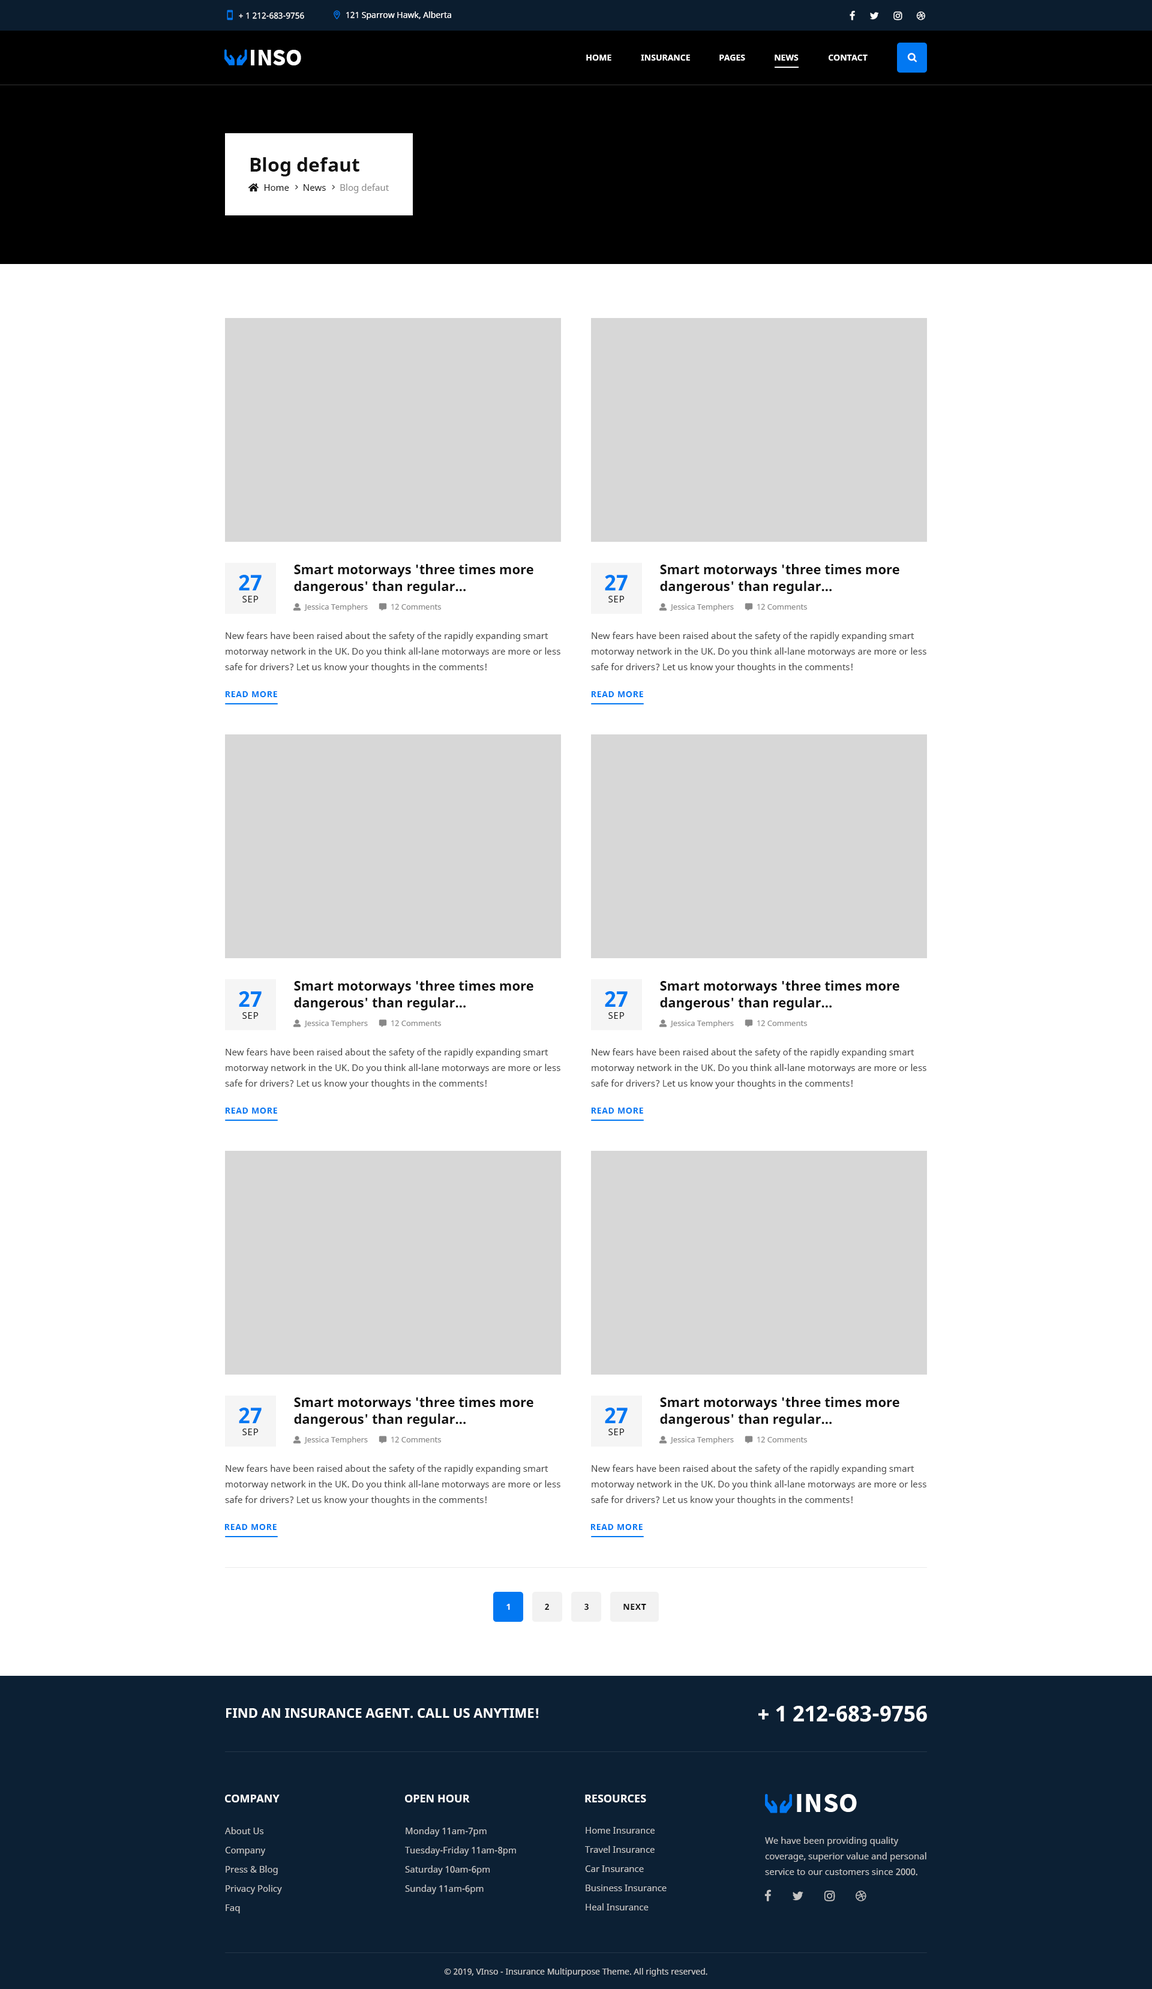
<style>
.page{position:relative;width:1152px;height:1989px;background:#ffffff}
.page>*{position:absolute;margin:0}
.t1{font:8.4px "NotoSans";color:#ffffff}
.t2{font:24px "SourceSansPro-Bold";color:#ffffff;text-transform:uppercase}
.t3{font:8.4px "NotoSans-Bold";color:#ffffff;text-transform:uppercase}
.t4{font:19.2px "NotoSans-Bold";color:#111111}
.t5{font:13.2px/16.8px "NotoSans-Bold";color:#111111}
.t6{font:9px/12px "NotoSans";letter-spacing:0.05em;color:#111111;text-transform:uppercase}
.t7{font:21.6px/12px "NotoSans-Bold";color:#0278f2;text-transform:uppercase}
.t8{font:9px/15.6px "NotoSans";color:#444444}
.t9{font:8.4px "NotoSans-Bold";letter-spacing:0.05em;color:#0278f2;text-transform:uppercase}
.t10{font:8.4px "NotoSans-Bold";letter-spacing:0.05em;color:#ffffff;text-transform:uppercase}
.t11{font:8.4px "NotoSans-Bold";letter-spacing:0.05em;color:#111111;text-transform:uppercase}
.t12{font:13.2px "NotoSans-Bold";color:#ffffff;text-transform:uppercase}
.t13{font:21.6px "NotoSans-Bold";color:#ffffff;text-transform:uppercase}
.t14{font:10.8px "NotoSans-Bold";color:#ffffff}
.t15{font:10.8px "NotoSans-Bold";color:#ffffff;text-transform:uppercase}
.t16{font:27.6px "SourceSansPro-Bold";letter-spacing:0.025em;color:#ffffff;text-transform:uppercase}
.t17{font:9px/19.2px "NotoSans";color:#c4c4c4}
.t18{font:9px/15.6px "NotoSans";color:#c4c4c4}
.t19{font:8.4px "NotoSans";color:#c4c4c4}
</style>
<div class="page">
<p class="t1" style="left:239px;top:12px;width:65px;height:7px">+ 1 212-683-9756</p>
<p class="t1" style="left:346px;top:11px;width:105px;height:9px">121 Sparrow Hawk, Alberta</p>
<p class="t2" style="left:251px;top:50px;width:50px;height:15px">inso</p>
<p class="t3" style="left:586px;top:55px;width:25px;height:6px">Home</p>
<p class="t3" style="left:641px;top:55px;width:49px;height:6px">Insurance</p>
<p class="t3" style="left:719px;top:55px;width:26px;height:6px">Pages</p>
<p class="t3" style="left:775px;top:55px;width:24px;height:6px">News</p>
<p class="t3" style="left:829px;top:55px;width:39px;height:6px">COntact</p>
<p class="t4" style="left:250px;top:157px;width:109px;height:19px">Blog defaut</p>
<p class="t5" style="left:294px;top:564px;width:239px;height:30px">Smart motorways 'three times more<br>dangerous' than regular...</p>
<p class="t5" style="left:660px;top:564px;width:239px;height:30px">Smart motorways 'three times more<br>dangerous' than regular...</p>
<p class="t6" style="left:239px;top:575px;width:23px;height:27px;text-align:center"><span class="t7">27<br></span>sep</p>
<p class="t6" style="left:605px;top:575px;width:23px;height:27px;text-align:center"><span class="t7">27<br></span>sep</p>
<p class="t8" style="left:225px;top:632px;width:335px;height:41px">New fears have been raised about the safety of the rapidly expanding smart motorway network in the UK. Do you think all-lane motorways are more or less safe for drivers? Let us know your thoughts in the comments!</p>
<p class="t8" style="left:591px;top:632px;width:335px;height:41px">New fears have been raised about the safety of the rapidly expanding smart motorway network in the UK. Do you think all-lane motorways are more or less safe for drivers? Let us know your thoughts in the comments!</p>
<p class="t9" style="left:225px;top:691px;width:52px;height:6px">Read more</p>
<p class="t9" style="left:591px;top:691px;width:52px;height:6px">Read more</p>
<p class="t5" style="left:294px;top:980px;width:239px;height:30px">Smart motorways 'three times more<br>dangerous' than regular...</p>
<p class="t5" style="left:660px;top:980px;width:239px;height:30px">Smart motorways 'three times more<br>dangerous' than regular...</p>
<p class="t6" style="left:239px;top:991px;width:23px;height:28px;text-align:center"><span class="t7">27<br></span>sep</p>
<p class="t6" style="left:605px;top:991px;width:23px;height:28px;text-align:center"><span class="t7">27<br></span>sep</p>
<p class="t8" style="left:225px;top:1048px;width:335px;height:41px">New fears have been raised about the safety of the rapidly expanding smart motorway network in the UK. Do you think all-lane motorways are more or less safe for drivers? Let us know your thoughts in the comments!</p>
<p class="t8" style="left:591px;top:1048px;width:335px;height:41px">New fears have been raised about the safety of the rapidly expanding smart motorway network in the UK. Do you think all-lane motorways are more or less safe for drivers? Let us know your thoughts in the comments!</p>
<p class="t9" style="left:225px;top:1108px;width:52px;height:6px">Read more</p>
<p class="t9" style="left:591px;top:1108px;width:52px;height:6px">Read more</p>
<p class="t5" style="left:294px;top:1397px;width:239px;height:30px">Smart motorways 'three times more<br>dangerous' than regular...</p>
<p class="t5" style="left:660px;top:1397px;width:239px;height:30px">Smart motorways 'three times more<br>dangerous' than regular...</p>
<p class="t6" style="left:239px;top:1408px;width:23px;height:27px;text-align:center"><span class="t7">27<br></span>sep</p>
<p class="t6" style="left:605px;top:1408px;width:23px;height:27px;text-align:center"><span class="t7">27<br></span>sep</p>
<p class="t8" style="left:225px;top:1465px;width:335px;height:40px">New fears have been raised about the safety of the rapidly expanding smart motorway network in the UK. Do you think all-lane motorways are more or less safe for drivers? Let us know your thoughts in the comments!</p>
<p class="t8" style="left:591px;top:1465px;width:335px;height:40px">New fears have been raised about the safety of the rapidly expanding smart motorway network in the UK. Do you think all-lane motorways are more or less safe for drivers? Let us know your thoughts in the comments!</p>
<p class="t9" style="left:224px;top:1524px;width:53px;height:6px">Read more</p>
<p class="t9" style="left:590px;top:1524px;width:53px;height:6px">Read more</p>
<p class="t10" style="left:506px;top:1604px;width:4px;height:6px">1</p>
<p class="t11" style="left:545px;top:1603px;width:4px;height:7px">2</p>
<p class="t11" style="left:584px;top:1603px;width:5px;height:7px">3</p>
<p class="t11" style="left:623px;top:1604px;width:23px;height:6px">Next</p>
<p class="t12" style="left:226px;top:1708px;width:313px;height:10px">Find an Insurance agent. Call us anytime!</p>
<p class="t13" style="left:758px;top:1706px;width:169px;height:16px">+ 1 212-683-9756</p>
<p class="t14" style="left:225px;top:1795px;width:55px;height:7px">COMPANY</p>
<p class="t15" style="left:405px;top:1795px;width:65px;height:7px">Open hour</p>
<p class="t15" style="left:585px;top:1795px;width:61px;height:7px">RESOURCES</p>
<p class="t16" style="left:797px;top:1794px;width:60px;height:18px">Inso</p>
<p class="t17" style="left:225px;top:1827px;width:57px;height:86px">About Us<br>Company<br>Press &amp; Blog<br>Privacy Policy<br>Faq</p>
<p class="t17" style="left:405px;top:1827px;width:111px;height:67px">Monday 11am-7pm<br>Tuesday-Friday 11am-8pm<br>Saturday 10am-6pm<br>Sunday 11am-6pm</p>
<p class="t17" style="left:585px;top:1827px;width:82px;height:83px">Home Insurance<br>Travel Insurance<br>Car Insurance<br>Business Insurance<br>Heal Insurance</p>
<p class="t18" style="left:765px;top:1837px;width:161px;height:39px">We have been providing quality coverage, superior value and personal service to our customers since 2000.</p>
<p class="t19" style="left:444px;top:1968px;width:263px;height:8px">© 2019, VInso - Insurance Multipurpose Theme. All rights reserved.</p>
</div>
